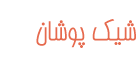
<style>
.page{position:relative;width:137px;height:64px;background:#ffffff}
.page>*{position:absolute;margin:0}
.t1{font:26.9px "BBardiya";color:#d75b5b}
</style>
<div class="page">
<p class="t1" style="left:36px;top:19px;width:100px;height:29px">شیک پوشان</p>
</div>
